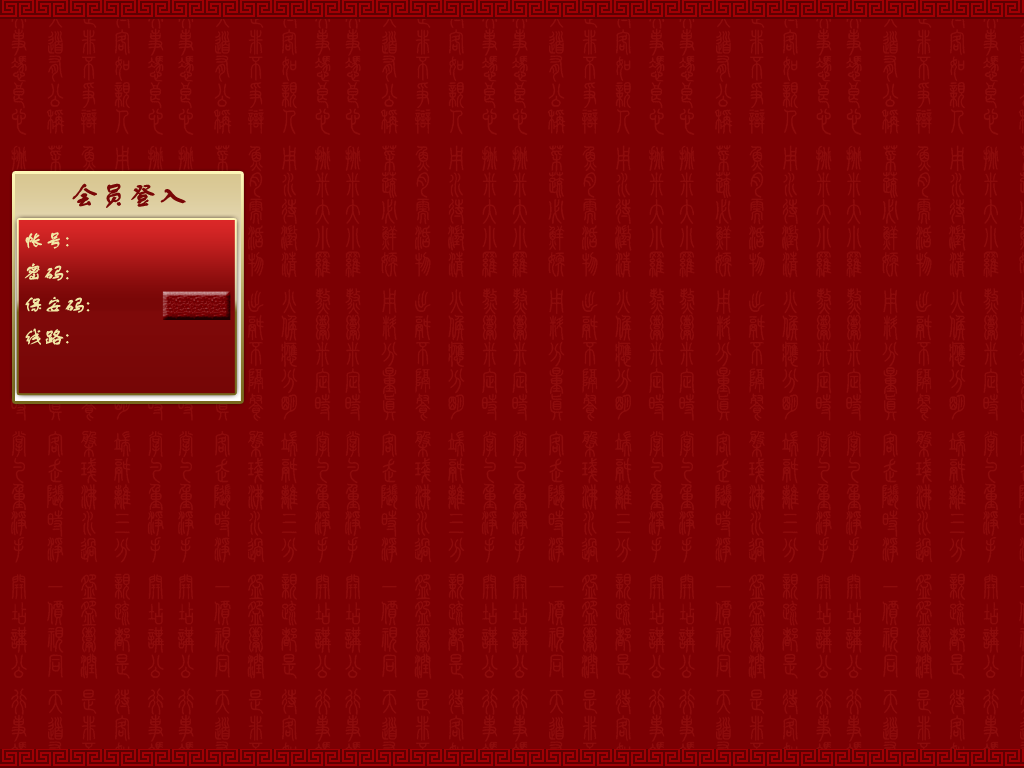
<style>
.page{position:relative;width:1024px;height:768px;background:#7b0003}
.page>*{position:absolute;margin:0}
.t1{font:28px "FZSTK--GBK1-0";color:#790707;font-weight:bold}
.t2{font:20px "FZSTK--GBK1-0";color:#f1e8a5;font-weight:bold}
</style>
<div class="page">
<p class="t1" style="left:72px;top:183px;width:114px;height:25px">会员登入</p>
<p class="t2" style="left:25px;top:232px;width:44px;height:17px">帐号:</p>
<p class="t2" style="left:24px;top:263px;width:45px;height:18px">密码:</p>
<p class="t2" style="left:25px;top:296px;width:65px;height:17px">保安码:</p>
<p class="t2" style="left:25px;top:328px;width:44px;height:17px">线路:</p>
</div>
